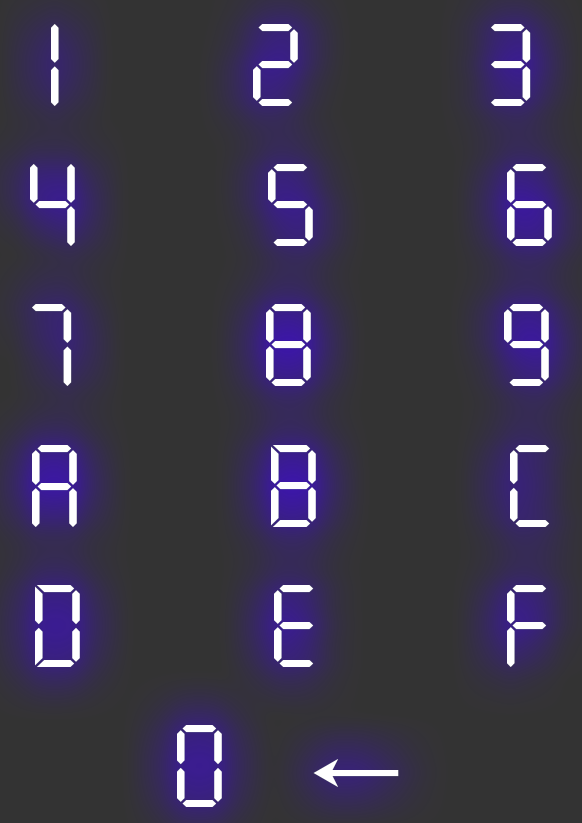
<style>
.page{position:relative;width:582px;height:823px;background:#333333}
.page>*{position:absolute;margin:0}
.t1{font:116.9px "SevenSegmentRegular";letter-spacing:0.62em;color:#ffffff}
.t2{font:116.9px "LucidaSansUnicode";letter-spacing:0.62em;color:#ffffff}
</style>
<div class="page">
<p class="t1" style="left:30px;top:24px;width:522px;height:783px;text-align:center">1 2 3<br>4 5 6<br>7 8 9<br>a b c<br>d e f<br>0<span class="t2">←</span></p>
</div>
